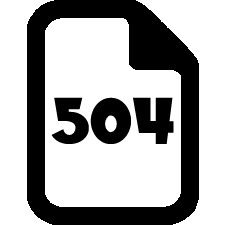
<style>
.page{position:relative;width:225px;height:225px;background:#ffffff}
.page>*{position:absolute;margin:0}
.t1{font:60px "BlitzkriegNF";color:#000000}
</style>
<div class="page">
<p class="t1" style="left:51px;top:97px;width:123px;height:47px">504</p>
</div>
